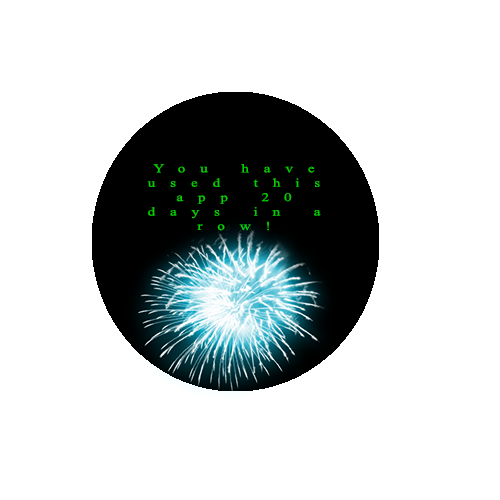
<style>
.page{position:relative;width:500px;height:500px;background:#ffffff}
.page>*{position:absolute;margin:0}
.t1{font:12px "TimesNewRomanPSMT";letter-spacing:0.985em;color:#05cd00;scale:1.26 1}
</style>
<div class="page">
<p class="t1" style="left:147px;top:164px;width:174px;height:67px;text-align:center">You have used this app 20 days in a row!</p>
</div>
